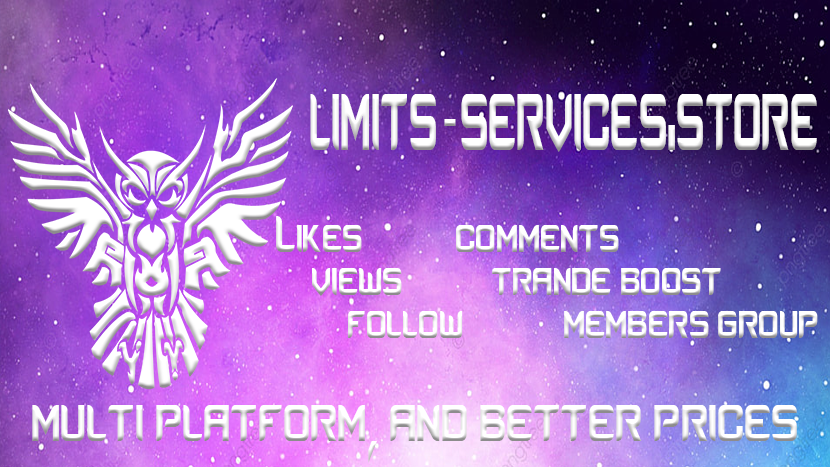
<style>
.page{position:relative;width:830px;height:467px}
.page>*{position:absolute;margin:0}
.t1{font:150px "Counter-StrikeRegular";color:#ffffff;scale:0.33 1}
.t2{font:96px "Cambria";scale:0.5 1}
.t3{font:72px "Counter-StrikeRegular";color:#ffffff;scale:0.5 1}
.t4{font:96px "Counter-StrikeRegular";color:#ffffff;scale:0.5 1}
</style>
<div class="page">
<p class="t1" style="left:310px;top:94px;width:507px;height:58px">limits  services.store</p>
<p class="t2" style="left:444px;top:119px;width:12px;height:7px">-</p>
<p class="t3" style="left:276px;top:216px;width:542px;height:122px">Likes    comments <br> views   trande boost<br>  follow   members group</p>
<p class="t4" style="left:32px;top:405px;width:765px;height:58px">multi platform, and better prices</p>
</div>
